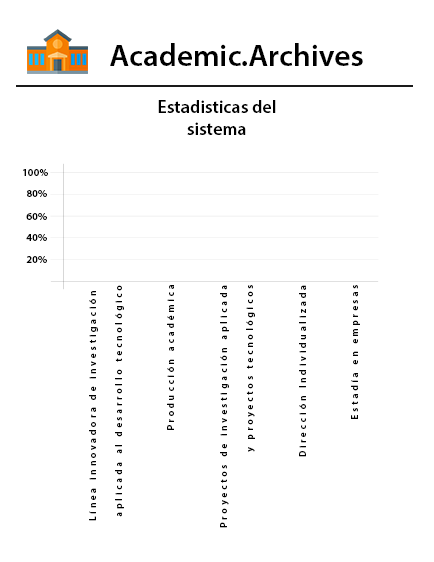
<style>
.page{position:relative;width:434px;height:562px;background:#ffffff}
.page>*{position:absolute;margin:0}
.t1{font:31.2px "MyriadPro-Semibold";color:#000000}
.t2{font:18.1px "MyriadPro-Semibold";color:#000000}
.t3{font:10.7px "MyriadPro-Semibold";color:#000000}
.t4{font:9.2px/26.2px "MyriadPro-Semibold";letter-spacing:0.32em;color:#000000}
</style>
<div class="page">
<p class="t1" style="left:110px;top:43px;width:253px;height:23px">Academic.Archives</p>
<p class="t2" style="left:158px;top:100px;width:118px;height:35px;text-align:center">Estadisticas del<br>sistema</p>
<p class="t3" style="left:23px;top:169px;width:25px;height:7px">100%</p>
<p class="t3" style="left:27px;top:190px;width:20px;height:7px">80%</p>
<p class="t3" style="left:26px;top:213px;width:21px;height:7px">60%</p>
<p class="t3" style="left:26px;top:234px;width:21px;height:7px">40%</p>
<p class="t3" style="left:26px;top:256px;width:21px;height:7px">20%</p>
<p class="t4" style="left:89px;top:285px;width:271px;height:243px;text-align:right;rotate:-90deg">Línea innovadora de investigación <br>aplicada al desarrollo tecnológico<br><br>Producción académica<br><br>Proyectos de investigación aplicada<br> y proyectos tecnológicos<br><br>Dirección Individualizada<br><br>Estadía en empresas</p>
</div>
